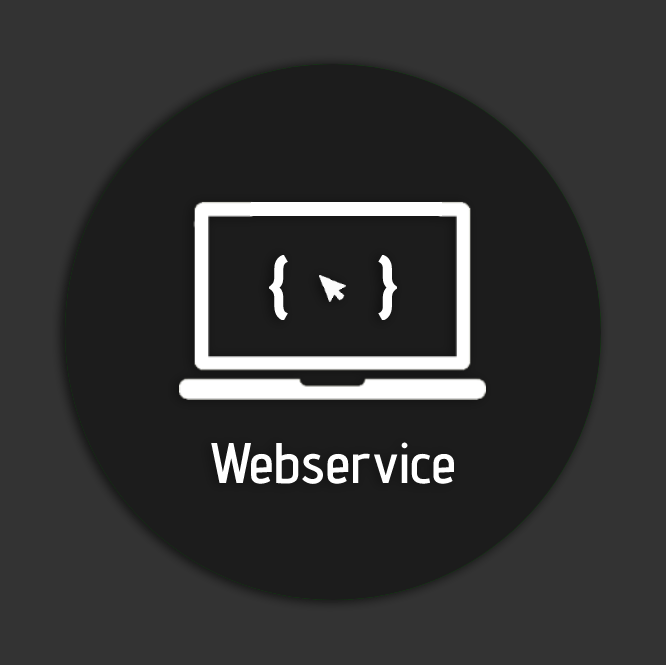
<style>
.page{position:relative;width:666px;height:665px;background:#333333}
.page>*{position:absolute;margin:0}
.t1{font:66.2px "AdventPro-SemiBold";color:#ffffff}
.t2{font:57px "AdventPro-SemiBold";color:#ffffff}
</style>
<div class="page">
<p class="t1" style="left:269px;top:255px;width:128px;height:65px">{      }</p>
<p class="t2" style="left:211px;top:442px;width:244px;height:42px">Webservice</p>
</div>
